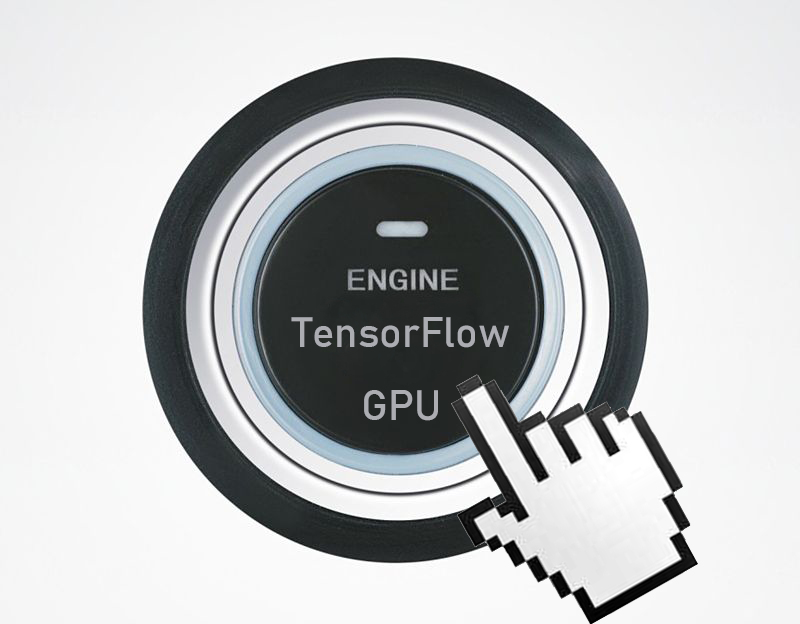
<style>
.page{position:relative;width:800px;height:624px}
.page>*{position:absolute;margin:0}
.t1{font:41.7px "Bahnschrift";color:#acadb3}
</style>
<div class="page">
<p class="t1" style="left:291px;top:317px;width:218px;height:104px;text-align:center">TensorFlow<br>GPU</p>
</div>
